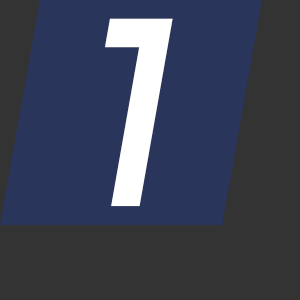
<style>
.page{position:relative;width:300px;height:300px;background:#29355a}
.page>*{position:absolute;margin:0}
.t1{font:214px "7THDR2020Regular";letter-spacing:-0.01em;color:#ffffff;font-style:italic}
</style>
<div class="page">
<p class="t1" style="left:105px;top:18px;width:68px;height:189px">1</p>
</div>
